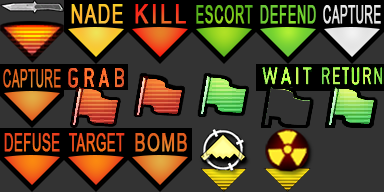
<style>
.page{position:relative;width:384px;height:192px;background:#333333}
.page>*{position:absolute;margin:0}
.t1{font:26px "ArialNarrow";letter-spacing:0.05em;color:#fbbd2e;font-weight:bold;scale:0.8 1}
.t2{font:26px "ArialNarrow";letter-spacing:0.1em;font-weight:bold;scale:0.96 1}
.t3{font:25px "ArialNarrow";letter-spacing:0.05em;color:#69bf1d;font-weight:bold;scale:0.6 1}
.t4{font:25px "ArialNarrow";letter-spacing:0.05em;color:#70cf32;font-weight:bold;scale:0.6 1}
.t5{font:25px "ArialNarrow";letter-spacing:0.01em;color:#e4e4e4;font-weight:bold;scale:0.56 1}
.t6{font:25px "ArialNarrow";letter-spacing:0.01em;color:#e36520;font-weight:bold;scale:0.56 1}
.t7{font:25px "ArialNarrow";letter-spacing:0.01em;color:#ed4e1c;font-weight:bold;scale:0.64 1}
.t8{font:25px "ArialNarrow";letter-spacing:0.01em;color:#ed551c;font-weight:bold;scale:0.64 1}
.t9{font:25px "ArialNarrow";letter-spacing:0.05em;color:#e36820;font-weight:bold;scale:0.8 1}
</style>
<div class="page">
<p class="t1" style="left:71px;top:4px;width:52px;height:20px">NADE</p>
<p class="t2" style="left:135px;top:4px;width:51px;height:20px">KILL</p>
<p class="t3" style="left:196px;top:5px;width:57px;height:19px">ESCORT</p>
<p class="t4" style="left:260px;top:5px;width:56px;height:19px">DEFEND</p>
<p class="t5" style="left:323px;top:5px;width:58px;height:19px">CAPTURE</p>
<p class="t6" style="left:3px;top:69px;width:58px;height:19px">CAPTURE</p>
<p class="t7" style="left:4px;top:133px;width:56px;height:19px">DEFUSE</p>
<p class="t8" style="left:68px;top:133px;width:57px;height:19px">TARGET</p>
<p class="t9" style="left:135px;top:133px;width:52px;height:19px">BOMB</p>
</div>
